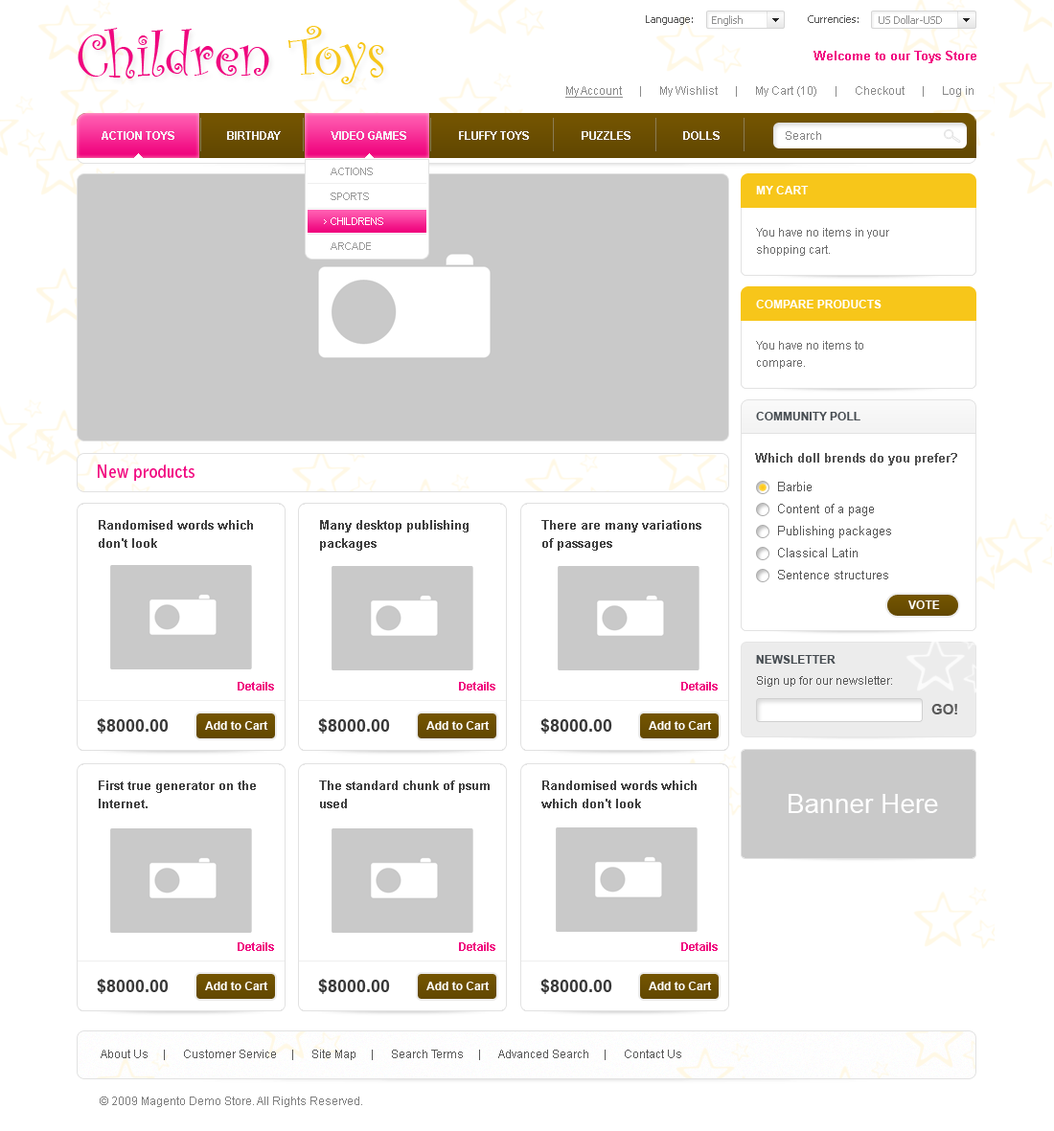
<style>
.page{position:relative;width:1054px;height:1131px;background:#ffffff}
.page>*{position:absolute;margin:0}
.t1{font:10.5px "Tahoma";color:#545454}
.t2{font:10.5px "Tahoma";color:#929292}
.t3{font:61.3px "CurlzMT";color:#f0067f}
.t4{font:61.3px "CurlzMT";color:#f7c61a}
.t5{font:12.5px "Arial-BoldMT";color:#f10b82}
.t6{font:11.5px "ArialMT";color:#8a8a8a}
.t7{font:11.5px "ArialMT";color:#8a8a8a;text-decoration:underline}
.t8{font:11.5px "Arial-BoldMT";color:#eeeeee;text-transform:uppercase}
.t9{font:11.5px "Arial-BoldMT";color:#f7f6f6;text-transform:uppercase}
.t10{font:11.5px "ArialMT";color:#848484}
.t11{font:10.5px/24.9px "ArialMT";color:#999999;text-transform:uppercase}
.t12{font:10.5px/24.9px "ArialMT";color:#ffffff;text-transform:uppercase}
.t13{font:11.5px "Arial-BoldMT";color:#ffffff;text-transform:uppercase}
.t14{font:11.5px/17.2px "ArialMT";color:#6d6d6d}
.t15{font:11.5px "Arial-BoldMT";color:#474d52;text-transform:uppercase}
.t16{font:12.5px "Arial-BoldMT";color:#505050}
.t17{font:17.2px "BellGothicStd-Bold";color:#f10b82}
.t18{font:12.5px "ArialMT";color:#545454}
.t19{font:12.5px/18.2px "Arial-BoldMT";color:#3f3f3f}
.t20{font:11.5px "Arial-BoldMT";color:#ffffff}
.t21{font:11.5px "ArialMT";color:#575757}
.t22{font:11.5px "Arial-BoldMT";color:#f00880}
.t23{font:14.4px "Arial-BoldMT";color:#595959;text-transform:uppercase}
.t24{font:17.2px "Arial-BoldMT";color:#383838}
.t25{font:26.8px "ArialMT";color:#ffffff}
.t26{font:11.5px "ArialMT";color:#585858}
.t27{font:11.5px "ArialMT";color:#7f7f7f}
</style>
<div class="page">
<p class="t1" style="left:646px;top:15px;width:47px;height:10px">Language:</p>
<p class="t2" style="left:712px;top:15px;width:31px;height:11px">English</p>
<p class="t1" style="left:808px;top:15px;width:50px;height:8px">Currencies:</p>
<p class="t2" style="left:879px;top:15px;width:63px;height:9px">US Dollar-USD</p>
<p class="t3" style="left:78px;top:26px;width:306px;height:58px">Children <span class="t4">Toys</span></p>
<p class="t5" style="left:813px;top:51px;width:163px;height:12px">Welcome to our Toys Store</p>
<p class="t6" style="left:565px;top:86px;width:408px;height:12px"><span class="t7">My Account</span>      |      My Wishlist      |      My Cart (10)      |      Checkout      |      Log in</p>
<p class="t8" style="left:102px;top:131px;width:618px;height:9px"><span class="t9">Action toys                  </span>Birthday  <span class="t9">                Video games             </span>     Fluffy toys                  Puzzles                  Dolls</p>
<p class="t10" style="left:786px;top:131px;width:35px;height:9px">Search</p>
<p class="t11" style="left:331px;top:168px;width:52px;height:82px">Actions<br>Sports<br><span class="t12">Childrens<br></span>Arcade</p>
<p class="t13" style="left:756px;top:186px;width:53px;height:8px">My cart</p>
<p class="t14" style="left:756px;top:228px;width:133px;height:28px">You have no items in your<br>shopping cart.</p>
<p class="t13" style="left:756px;top:300px;width:125px;height:8px">Compare products</p>
<p class="t14" style="left:756px;top:341px;width:107px;height:28px">You have no items to <br>compare.</p>
<p class="t15" style="left:756px;top:412px;width:104px;height:9px">Community poll</p>
<p class="t16" style="left:755px;top:453px;width:202px;height:13px">Which doll brends do you prefer?</p>
<p class="t17" style="left:98px;top:465px;width:96px;height:16px">New products</p>
<p class="t18" style="left:778px;top:482px;width:33px;height:9px">Barbie</p>
<p class="t18" style="left:778px;top:504px;width:96px;height:12px">Content of a page</p>
<p class="t19" style="left:99px;top:520px;width:154px;height:28px">Randomised words which don't look</p>
<p class="t19" style="left:320px;top:520px;width:148px;height:31px">Many desktop publishing packages</p>
<p class="t19" style="left:541px;top:520px;width:160px;height:31px">There are many variations of passages</p>
<p class="t18" style="left:778px;top:526px;width:113px;height:12px">Publishing packages</p>
<p class="t18" style="left:778px;top:548px;width:79px;height:10px">Classical Latin</p>
<p class="t18" style="left:778px;top:570px;width:110px;height:10px">Sentence structures</p>
<p class="t20" style="left:908px;top:601px;width:32px;height:8px">VOTE</p>
<p class="t15" style="left:756px;top:655px;width:79px;height:9px">Newsletter</p>
<p class="t21" style="left:757px;top:676px;width:135px;height:11px">Sign up for our newsletter:</p>
<p class="t22" style="left:238px;top:682px;width:36px;height:9px">Details</p>
<p class="t22" style="left:459px;top:682px;width:36px;height:9px">Details</p>
<p class="t22" style="left:681px;top:682px;width:37px;height:9px">Details</p>
<p class="t23" style="left:931px;top:704px;width:26px;height:11px">Go!</p>
<p class="t24" style="left:97px;top:719px;width:72px;height:15px">$8000.00</p>
<p class="t20" style="left:205px;top:721px;width:63px;height:9px">Add to Cart</p>
<p class="t24" style="left:318px;top:719px;width:72px;height:15px">$8000.00</p>
<p class="t20" style="left:426px;top:721px;width:64px;height:9px">Add to Cart</p>
<p class="t24" style="left:540px;top:719px;width:72px;height:15px">$8000.00</p>
<p class="t20" style="left:649px;top:721px;width:63px;height:9px">Add to Cart</p>
<p class="t19" style="left:99px;top:781px;width:157px;height:28px">First true generator on the Internet.</p>
<p class="t19" style="left:319px;top:781px;width:171px;height:28px">The standard chunk of psum used</p>
<p class="t19" style="left:541px;top:781px;width:156px;height:28px">Randomised words which which don't look</p>
<p class="t25" style="left:788px;top:794px;width:150px;height:19px">Banner Here</p>
<p class="t22" style="left:238px;top:943px;width:36px;height:8px">Details</p>
<p class="t22" style="left:459px;top:943px;width:36px;height:8px">Details</p>
<p class="t22" style="left:681px;top:943px;width:37px;height:8px">Details</p>
<p class="t24" style="left:97px;top:979px;width:72px;height:15px">$8000.00</p>
<p class="t20" style="left:205px;top:982px;width:63px;height:9px">Add to Cart</p>
<p class="t24" style="left:318px;top:979px;width:72px;height:15px">$8000.00</p>
<p class="t20" style="left:426px;top:982px;width:64px;height:9px">Add to Cart</p>
<p class="t24" style="left:540px;top:979px;width:72px;height:15px">$8000.00</p>
<p class="t20" style="left:649px;top:982px;width:63px;height:9px">Add to Cart</p>
<p class="t26" style="left:101px;top:1050px;width:580px;height:11px">About Us     |      Customer Service     |      Site Map     |      Search Terms     |      Advanced Search     |      Contact Us</p>
<p class="t27" style="left:100px;top:1097px;width:262px;height:11px">© 2009 Magento Demo Store. All Rights Reserved.</p>
</div>
